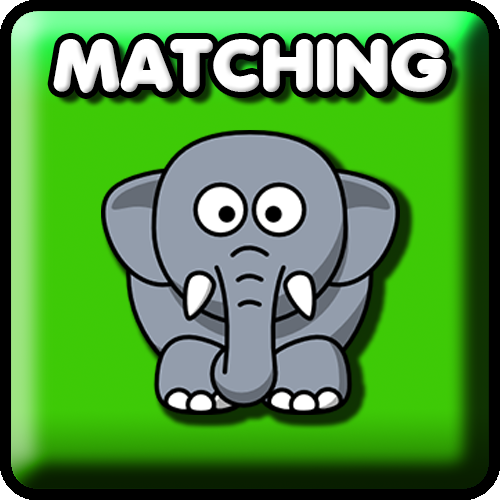
<style>
.page{position:relative;width:500px;height:500px}
.page>*{position:absolute;margin:0}
.t1{font:72px "Valken";color:#ffffff}
</style>
<div class="page">
<p class="t1" style="left:53px;top:39px;width:394px;height:54px">MATCHING</p>
</div>
